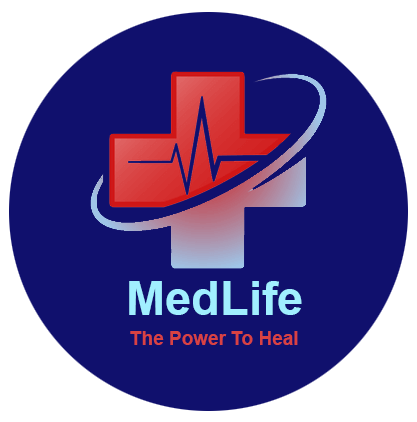
<style>
.page{position:relative;width:417px;height:422px;background:#10106d}
.page>*{position:absolute;margin:0}
.t1{font:47px "Arial-BoldMT";color:#a1efff}
.t2{font:19px "Arial-BoldMT";color:#d94242}
</style>
<div class="page">
<p class="t1" style="left:129px;top:281px;width:173px;height:34px">MedLife</p>
<p class="t2" style="left:130px;top:331px;width:168px;height:14px">The Power To Heal</p>
</div>
